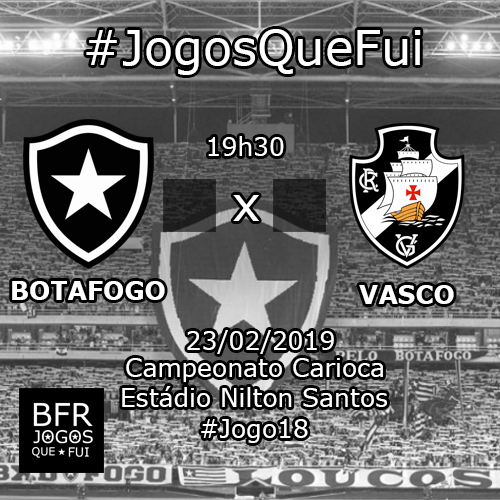
<style>
.page{position:relative;width:500px;height:500px}
.page>*{position:absolute;margin:0}
.t1{font:48px "Verdana";color:#ffffff}
.t2{font:25px "Verdana";color:#ffffff}
.t3{font:25px "Verdana-Bold";color:#ffffff}
</style>
<div class="page">
<p class="t1" style="left:86px;top:29px;width:335px;height:46px">#JogosQueFui</p>
<p class="t2" style="left:208px;top:136px;width:76px;height:20px">19h30</p>
<p class="t1" style="left:233px;top:195px;width:26px;height:26px">x</p>
<p class="t3" style="left:12px;top:281px;width:153px;height:19px">BOTAFOGO</p>
<p class="t3" style="left:359px;top:285px;width:95px;height:19px">VASCO</p>
<p class="t2" style="left:187px;top:330px;width:147px;height:24px">23/02/2019</p>
<p class="t2" style="left:126px;top:358px;width:257px;height:24px">Campeonato Carioca</p>
<p class="t2" style="left:122px;top:386px;width:265px;height:21px">Estádio Nilton Santos</p>
<p class="t2" style="left:201px;top:419px;width:107px;height:24px">#Jogo18</p>
</div>
